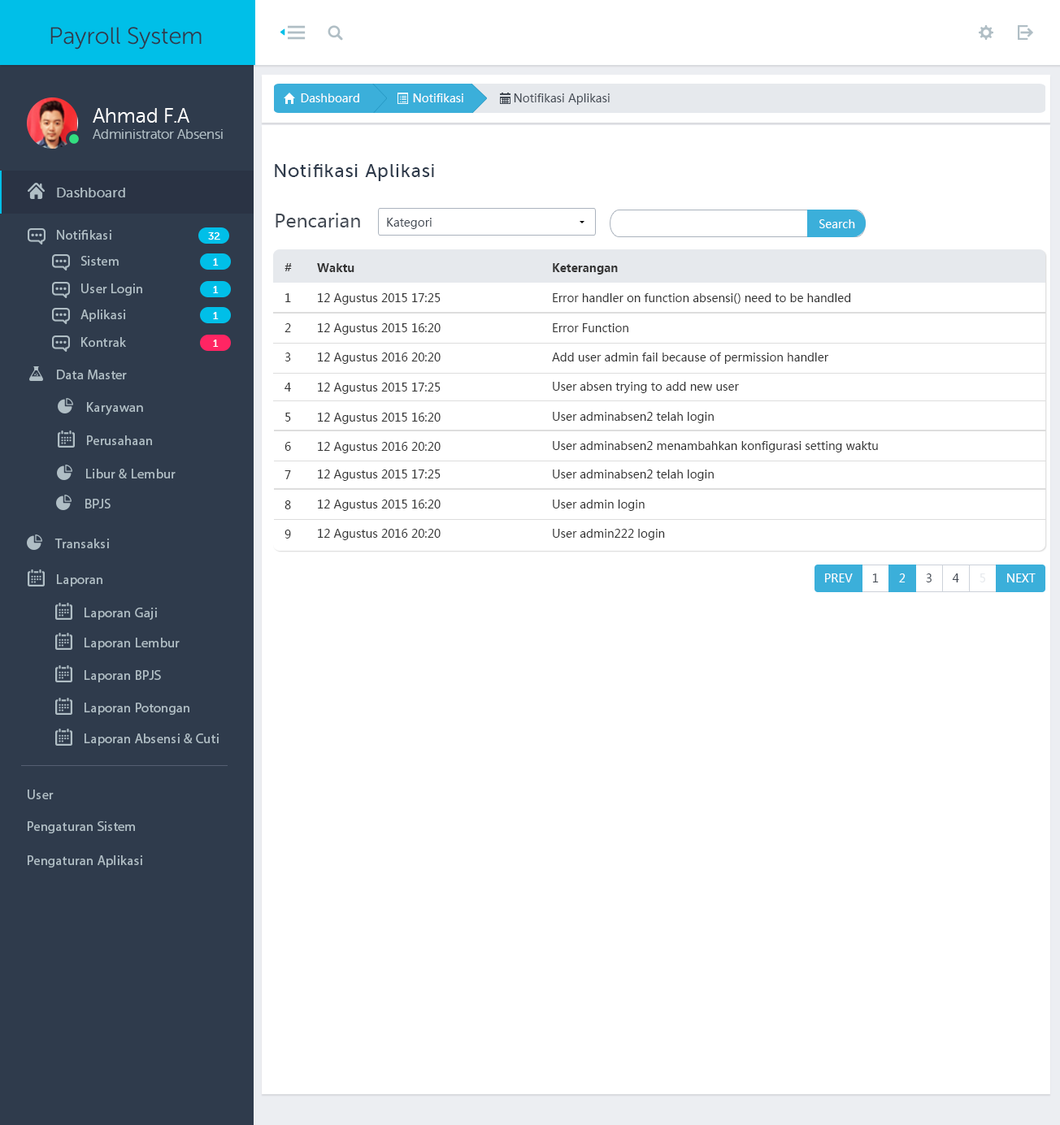
<style>
.page{position:relative;width:1060px;height:1125px;background:#ffffff}
.page>*{position:absolute;margin:0}
.t1{font:23.7px "MuseoSansRounded-300";color:#2f3b4c}
.t2{font:11.4px "MicrosoftYaHei";color:#ffffff}
.t3{font:11.4px "MicrosoftYaHei";color:#434a54}
.t4{font:13.5px "MuseoSansRounded-300";color:#b0bec5}
.t5{font:20.3px "MuseoSansRounded-300";color:#ffffff}
.t6{font:18.6px "MuseoSans-500";letter-spacing:0.04em;color:#2f3b4c}
.t7{font:13.5px "MuseoSans-500";letter-spacing:0.02em;color:#b0bec5}
.t8{font:18.6px "MicrosoftYaHei";color:#434a54}
.t9{font:13.5px "MyriadPro-Regular";letter-spacing:0.02em;color:#b0bec5}
.t10{font:10.2px "MuseoSans-500";letter-spacing:0.02em;color:#ffffff}
.t11{font:11.4px "MicrosoftYaHei-Bold";color:#333333}
.t12{font:11.4px "MicrosoftYaHei";color:#333333}
.t13{font:11.4px "MicrosoftYaHei";color:#e6e9ed}
</style>
<div class="page">
<p class="t1" style="left:50px;top:27px;width:152px;height:23px">Payroll System</p>
<p class="t2" style="left:301px;top:93px;width:58px;height:9px">Dashboard</p>
<p class="t2" style="left:413px;top:93px;width:50px;height:9px">Notifikasi</p>
<p class="t3" style="left:514px;top:93px;width:95px;height:12px">Notifikasi Aplikasi</p>
<p class="t4" style="left:93px;top:108px;width:130px;height:31px"><span class="t5">Ahmad F.A <br></span>Administrator Absensi</p>
<p class="t6" style="left:275px;top:164px;width:159px;height:17px">Notifikasi Aplikasi</p>
<p class="t7" style="left:57px;top:188px;width:68px;height:9px">Dashboard</p>
<p class="t8" style="left:275px;top:213px;width:85px;height:15px">Pencarian</p>
<p class="t3" style="left:387px;top:218px;width:44px;height:11px">Kategori</p>
<p class="t2" style="left:819px;top:219px;width:36px;height:9px">Search</p>
<p class="t9" style="left:57px;top:230px;width:54px;height:10px">Notifikasi</p>
<p class="t10" style="left:208px;top:232px;width:12px;height:8px">32</p>
<p class="t9" style="left:80px;top:256px;width:39px;height:10px">Sistem</p>
<p class="t10" style="left:213px;top:258px;width:6px;height:8px">1</p>
<p class="t11" style="left:284px;top:263px;width:8px;height:8px">#</p>
<p class="t11" style="left:317px;top:263px;width:37px;height:9px">Waktu</p>
<p class="t11" style="left:553px;top:263px;width:65px;height:12px">Keterangan</p>
<p class="t9" style="left:81px;top:284px;width:61px;height:12px">User Login</p>
<p class="t10" style="left:213px;top:286px;width:6px;height:7px">1</p>
<p class="t12" style="left:285px;top:293px;width:6px;height:9px">1</p>
<p class="t12" style="left:318px;top:293px;width:122px;height:12px">12 Agustus 2015 17:25</p>
<p class="t12" style="left:553px;top:293px;width:298px;height:11px">Error handler on function absensi() need to be handled</p>
<p class="t9" style="left:80px;top:310px;width:46px;height:12px">Aplikasi</p>
<p class="t10" style="left:213px;top:312px;width:6px;height:7px">1</p>
<p class="t12" style="left:284px;top:323px;width:7px;height:9px">2</p>
<p class="t12" style="left:318px;top:323px;width:122px;height:12px">12 Agustus 2015 16:20</p>
<p class="t12" style="left:553px;top:323px;width:75px;height:9px">Error Function</p>
<p class="t9" style="left:81px;top:337px;width:45px;height:10px">Kontrak</p>
<p class="t10" style="left:213px;top:340px;width:6px;height:7px">1</p>
<p class="t12" style="left:284px;top:353px;width:7px;height:9px">3</p>
<p class="t12" style="left:318px;top:353px;width:122px;height:11px">12 Agustus 2016 20:20</p>
<p class="t12" style="left:552px;top:353px;width:277px;height:11px">Add user admin fail because of permission handler</p>
<p class="t9" style="left:57px;top:370px;width:70px;height:9px">Data Master</p>
<p class="t12" style="left:284px;top:383px;width:7px;height:9px">4</p>
<p class="t12" style="left:318px;top:383px;width:122px;height:11px">12 Agustus 2015 17:25</p>
<p class="t12" style="left:553px;top:382px;width:186px;height:11px">User absen trying to add new user</p>
<p class="t9" style="left:87px;top:402px;width:56px;height:13px">Karyawan</p>
<p class="t12" style="left:285px;top:413px;width:6px;height:9px">5</p>
<p class="t12" style="left:318px;top:413px;width:122px;height:11px">12 Agustus 2015 16:20</p>
<p class="t12" style="left:553px;top:412px;width:160px;height:11px">User adminabsen2 telah login</p>
<p class="t9" style="left:87px;top:436px;width:65px;height:9px">Perusahaan</p>
<p class="t12" style="left:284px;top:442px;width:7px;height:9px">6</p>
<p class="t12" style="left:318px;top:442px;width:122px;height:11px">12 Agustus 2016 20:20</p>
<p class="t12" style="left:553px;top:441px;width:325px;height:12px">User adminabsen2 menambahkan konfigurasi setting waktu</p>
<p class="t9" style="left:86px;top:469px;width:90px;height:10px">Libur &amp; Lembur</p>
<p class="t12" style="left:284px;top:470px;width:7px;height:9px">7</p>
<p class="t12" style="left:318px;top:470px;width:122px;height:11px">12 Agustus 2015 17:25</p>
<p class="t12" style="left:553px;top:470px;width:160px;height:11px">User adminabsen2 telah login</p>
<p class="t9" style="left:85px;top:499px;width:26px;height:10px">BPJS</p>
<p class="t12" style="left:284px;top:501px;width:7px;height:8px">8</p>
<p class="t12" style="left:318px;top:500px;width:122px;height:11px">12 Agustus 2015 16:20</p>
<p class="t12" style="left:553px;top:500px;width:91px;height:11px">User admin login</p>
<p class="t12" style="left:284px;top:530px;width:7px;height:9px">9</p>
<p class="t12" style="left:318px;top:529px;width:122px;height:11px">12 Agustus 2016 20:20</p>
<p class="t12" style="left:553px;top:529px;width:112px;height:11px">User admin222 login</p>
<p class="t9" style="left:54px;top:539px;width:55px;height:9px">Transaksi</p>
<p class="t9" style="left:57px;top:574px;width:45px;height:13px">Laporan</p>
<p class="t2" style="left:825px;top:574px;width:27px;height:9px">PREV</p>
<p class="t3" style="left:872px;top:574px;width:6px;height:9px">1</p>
<p class="t2" style="left:899px;top:574px;width:6px;height:9px">2</p>
<p class="t3" style="left:926px;top:574px;width:5px;height:9px">3</p>
<p class="t3" style="left:952px;top:574px;width:7px;height:9px">4</p>
<p class="t13" style="left:979px;top:574px;width:6px;height:9px">5</p>
<p class="t2" style="left:1007px;top:574px;width:28px;height:9px">NEXT</p>
<p class="t9" style="left:85px;top:608px;width:72px;height:12px">Laporan Gaji</p>
<p class="t9" style="left:85px;top:638px;width:95px;height:12px">Laporan Lembur</p>
<p class="t9" style="left:85px;top:670px;width:76px;height:13px">Laporan BPJS</p>
<p class="t9" style="left:85px;top:703px;width:104px;height:12px">Laporan Potongan</p>
<p class="t9" style="left:85px;top:734px;width:134px;height:12px">Laporan Absensi &amp; Cuti</p>
<p class="t9" style="left:28px;top:790px;width:26px;height:10px">User</p>
<p class="t9" style="left:28px;top:821px;width:107px;height:13px">Pengaturan Sistem</p>
<p class="t9" style="left:28px;top:856px;width:114px;height:12px">Pengaturan Aplikasi</p>
</div>
